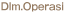
<style>
.page{position:relative;width:64px;height:15px;background:#ffffff}
.page>*{position:absolute;margin:0}
.t1{font:10px "GothicMB101Pro-DeBold";letter-spacing:-0.04em;color:#8b6e51}
</style>
<div class="page">
<p class="t1" style="left:1px;top:2px;width:63px;height:10px;opacity:0.9">Dlm.Operasi</p>
</div>
